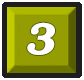
<style>
.page{position:relative;width:84px;height:80px;background:#949d01}
.page>*{position:absolute;margin:0}
.t1{font:45.2px "URWBookman-DemiItalic";color:#ffffff}
</style>
<div class="page">
<p class="t1" style="left:27px;top:22px;width:28px;height:33px">3</p>
</div>
